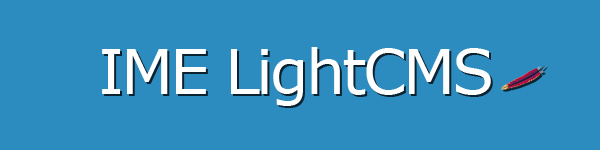
<style>
.page{position:relative;width:600px;height:150px;background:#2c8cc0}
.page>*{position:absolute;margin:0}
.t1{font:62px "Verdana";letter-spacing:-0.05em;color:#ffffff}
</style>
<div class="page">
<p class="t1" style="left:102px;top:47px;width:389px;height:59px">ΙΜΕ LightCMS</p>
</div>
